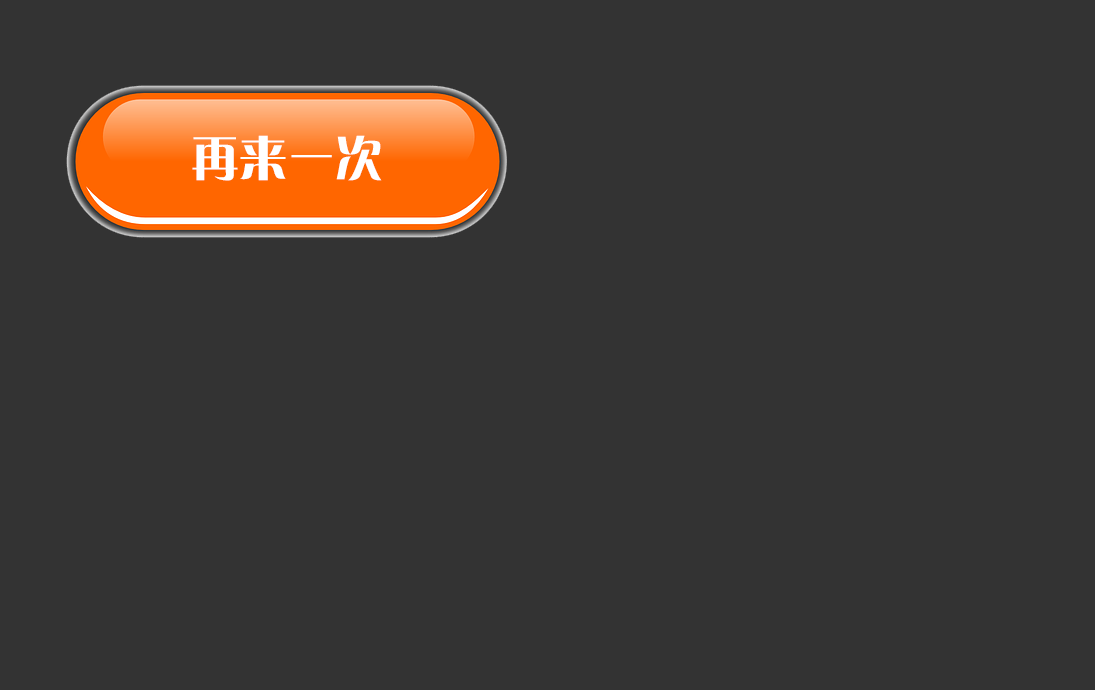
<style>
.page{position:relative;width:1095px;height:690px;background:#333333}
.page>*{position:absolute;margin:0}
.t1{font:48px "FZCQJW--GB1-0";color:#ffffff}
</style>
<div class="page">
<p class="t1" style="left:192px;top:135px;width:190px;height:46px">再来一次</p>
</div>
